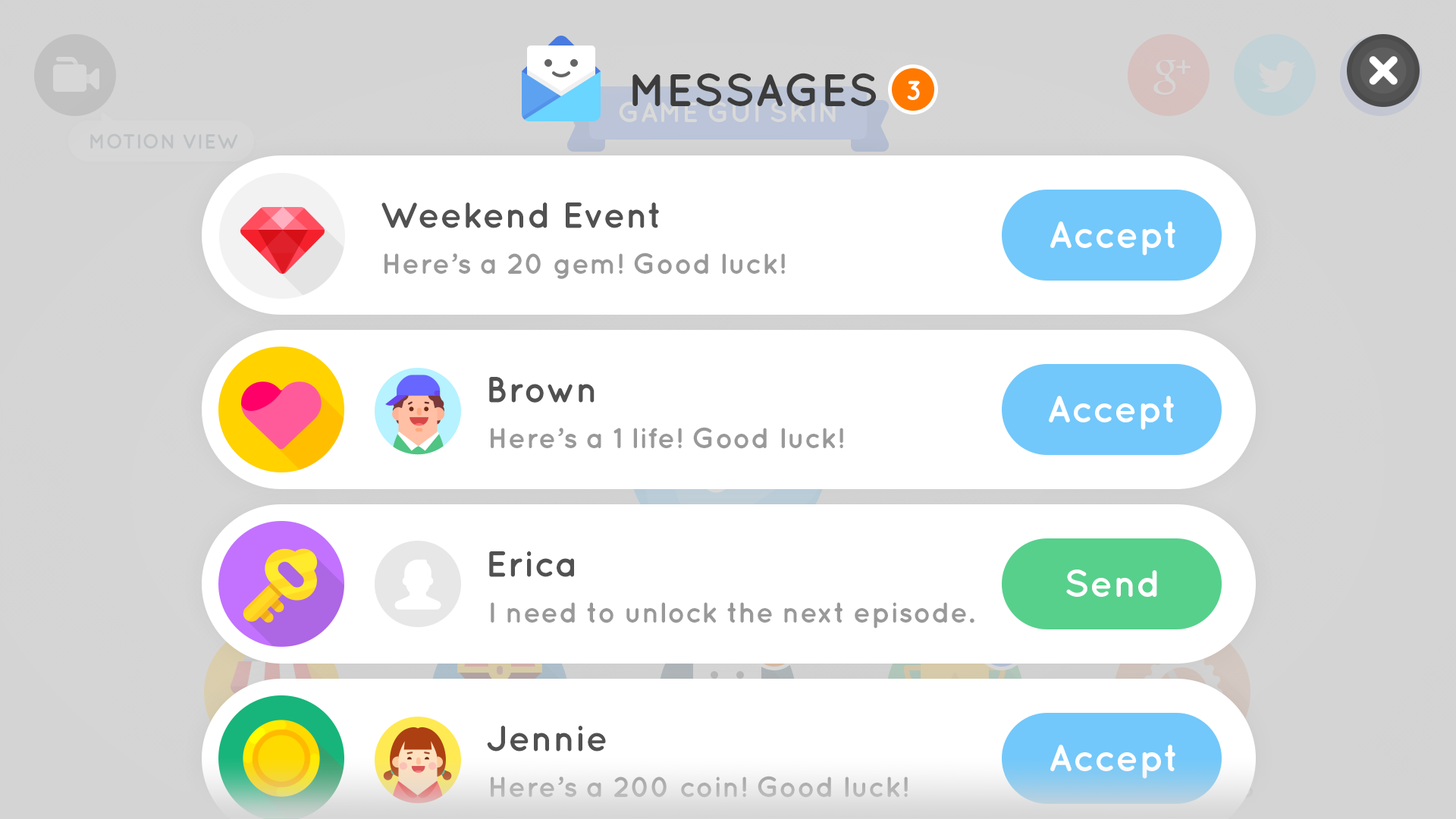
<style>
.page{position:relative;width:1456px;height:819px;background:#ffffff}
.page>*{position:absolute;margin:0}
.t1{font:45.5px "Quicksand-Bold";color:#3c3c3c;text-transform:uppercase}
.t2{font:27.3px "Quicksand-Bold";color:#ffffff;text-transform:uppercase}
.t3{font:36.4px "Quicksand-Bold";color:#515151}
.t4{font:37.9px "Quicksand-Bold";color:#ffffff}
.t5{font:28.8px "Quicksand-Bold";color:#999999}
.t6{font:28.8px "Quicksand-Bold";color:#b3b3b3}
</style>
<div class="page">
<p class="t1" style="left:632px;top:73px;width:244px;height:33px">MESSAGES</p>
<p class="t2" style="left:907px;top:80px;width:13px;height:20px">3</p>
<p class="t3" style="left:381px;top:202px;width:278px;height:26px">Weekend Event</p>
<p class="t4" style="left:1050px;top:221px;width:125px;height:35px">Accept</p>
<p class="t5" style="left:384px;top:253px;width:401px;height:26px">Here’s a 20 gem! Good luck!</p>
<p class="t3" style="left:489px;top:377px;width:106px;height:26px">Brown</p>
<p class="t4" style="left:1049px;top:396px;width:125px;height:34px">Accept</p>
<p class="t5" style="left:491px;top:427px;width:352px;height:22px">Here’s a 1 life! Good luck!</p>
<p class="t3" style="left:489px;top:551px;width:85px;height:26px">Erica</p>
<p class="t4" style="left:1066px;top:570px;width:91px;height:27px">Send</p>
<p class="t5" style="left:491px;top:602px;width:483px;height:27px">I need to unlock the next episode.</p>
<p class="t3" style="left:487px;top:726px;width:119px;height:25px">Jennie</p>
<p class="t4" style="left:1050px;top:745px;width:125px;height:34px">Accept</p>
<p class="t6" style="left:491px;top:776px;width:417px;height:22px">Here’s a 200 coin! Good luck!</p>
</div>
